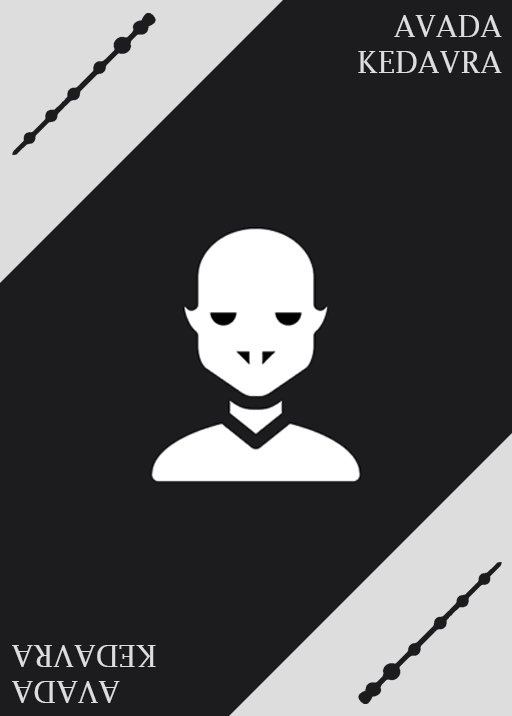
<style>
.page{position:relative;width:512px;height:716px;background:#1c1c1e}
.page>*{position:absolute;margin:0}
.t1{font:30px "LucidaFax";color:#dddddd;text-transform:uppercase}
</style>
<div class="page">
<p class="t1" style="left:358px;top:15px;width:144px;height:58px;text-align:right">Avada<br>Kedavra</p>
<p class="t1" style="left:12px;top:645px;width:144px;height:58px;text-align:right;rotate:180deg">Avada<br> Kedavra</p>
</div>
